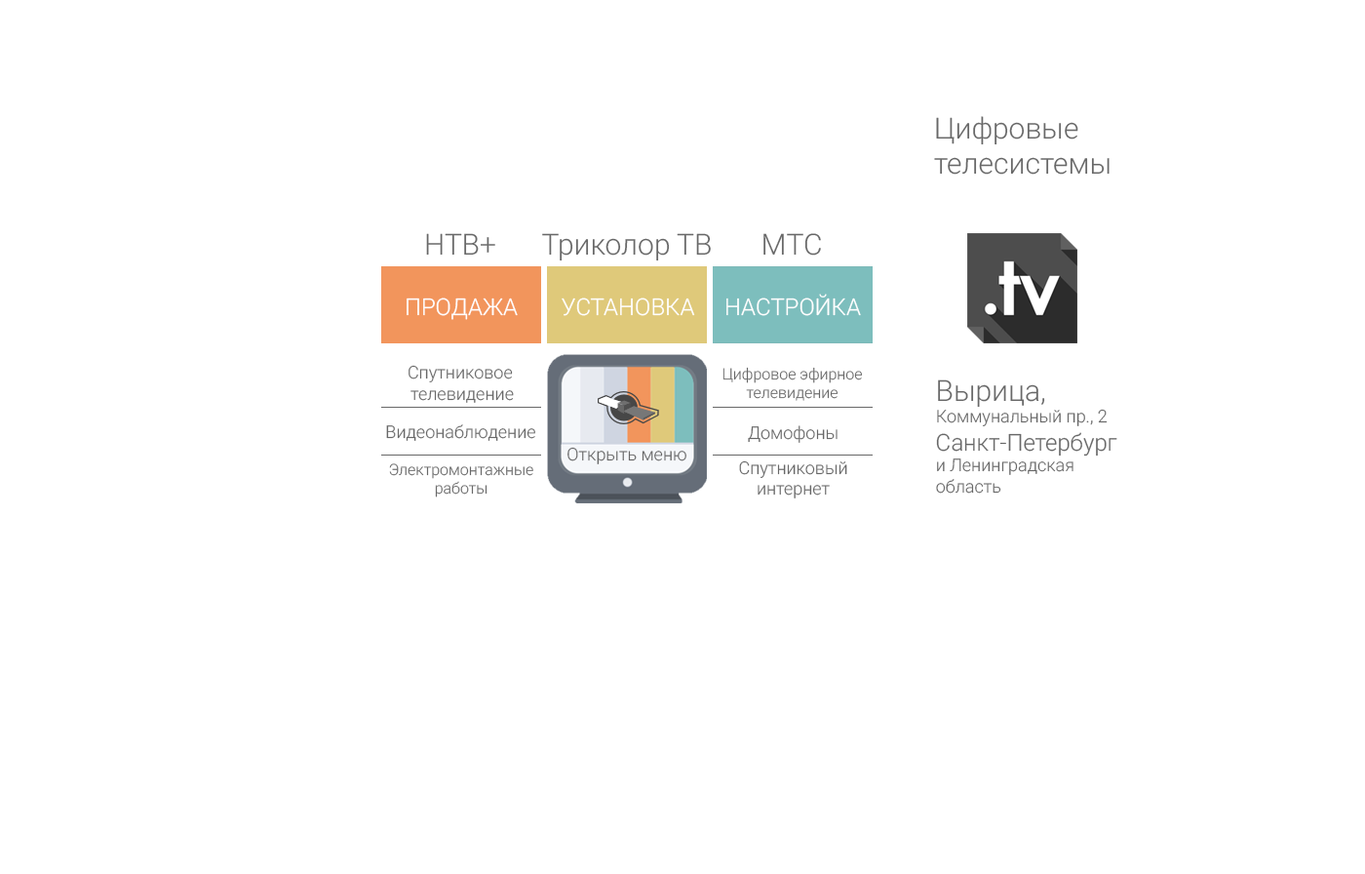
<style>
.page{position:relative;width:1365px;height:874px;background:#ffffff}
.page>*{position:absolute;margin:0}
.t1{font:29.2px "Roboto-Light";color:#686868}
.t2{font:23.4px "Roboto-Light";color:#ffffff}
.t3{font:17.5px "Roboto-Light";color:#686868}
.t4{font:15.6px "Roboto-Light";color:#686868}
.t5{font:23.4px "Roboto-Light";color:#686868}
</style>
<div class="page">
<p class="t1" style="left:934px;top:116px;width:176px;height:59px">Цифровые <br>телесистемы</p>
<p class="t1" style="left:426px;top:233px;width:69px;height:22px">НТВ+</p>
<p class="t1" style="left:542px;top:233px;width:169px;height:28px">Триколор ТВ</p>
<p class="t1" style="left:763px;top:233px;width:58px;height:22px">МТС</p>
<p class="t2" style="left:726px;top:293px;width:135px;height:23px">НАСТРОЙКА</p>
<p class="t2" style="left:407px;top:297px;width:111px;height:23px">ПРОДАЖА</p>
<p class="t2" style="left:562px;top:297px;width:133px;height:19px">УСТАНОВКА</p>
<p class="t3" style="left:409px;top:365px;width:105px;height:38px;text-align:center">Спутниковое <br>телевидение</p>
<p class="t4" style="left:722px;top:367px;width:141px;height:34px;text-align:center">Цифровое эфирное<br>телевидение</p>
<p class="t3" style="left:936px;top:379px;width:181px;height:114px"><span class="t1">Вырица,<br></span>Коммунальный пр., 2<br><span class="t5">Санкт-Петербург<br></span>и Ленинградская <br>область</p>
<p class="t3" style="left:386px;top:424px;width:149px;height:17px">Видеонаблюдение</p>
<p class="t3" style="left:748px;top:425px;width:90px;height:18px">Домофоны</p>
<p class="t3" style="left:567px;top:447px;width:119px;height:17px">Открыть меню</p>
<p class="t3" style="left:739px;top:460px;width:108px;height:38px;text-align:center">Спутниковый<br>интернет</p>
<p class="t4" style="left:389px;top:463px;width:144px;height:34px;text-align:center">Электромонтажные<br>работы</p>
</div>
